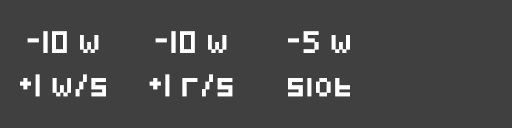
<style>
.page{position:relative;width:512px;height:128px;background:#404040}
.page>*{position:absolute;margin:0}
.t1{font:18px "Pixeled";letter-spacing:0.075em;color:#ffffff}
</style>
<div class="page">
<p class="t1" style="left:20px;top:31px;width:86px;height:66px;text-align:center">-10 w<br><br>+1 w/s</p>
<p class="t1" style="left:149px;top:31px;width:84px;height:66px;text-align:center">-10 w<br><br>+1 r/s</p>
<p class="t1" style="left:288px;top:31px;width:62px;height:66px;text-align:center">-5 w<br><br>slot</p>
</div>
